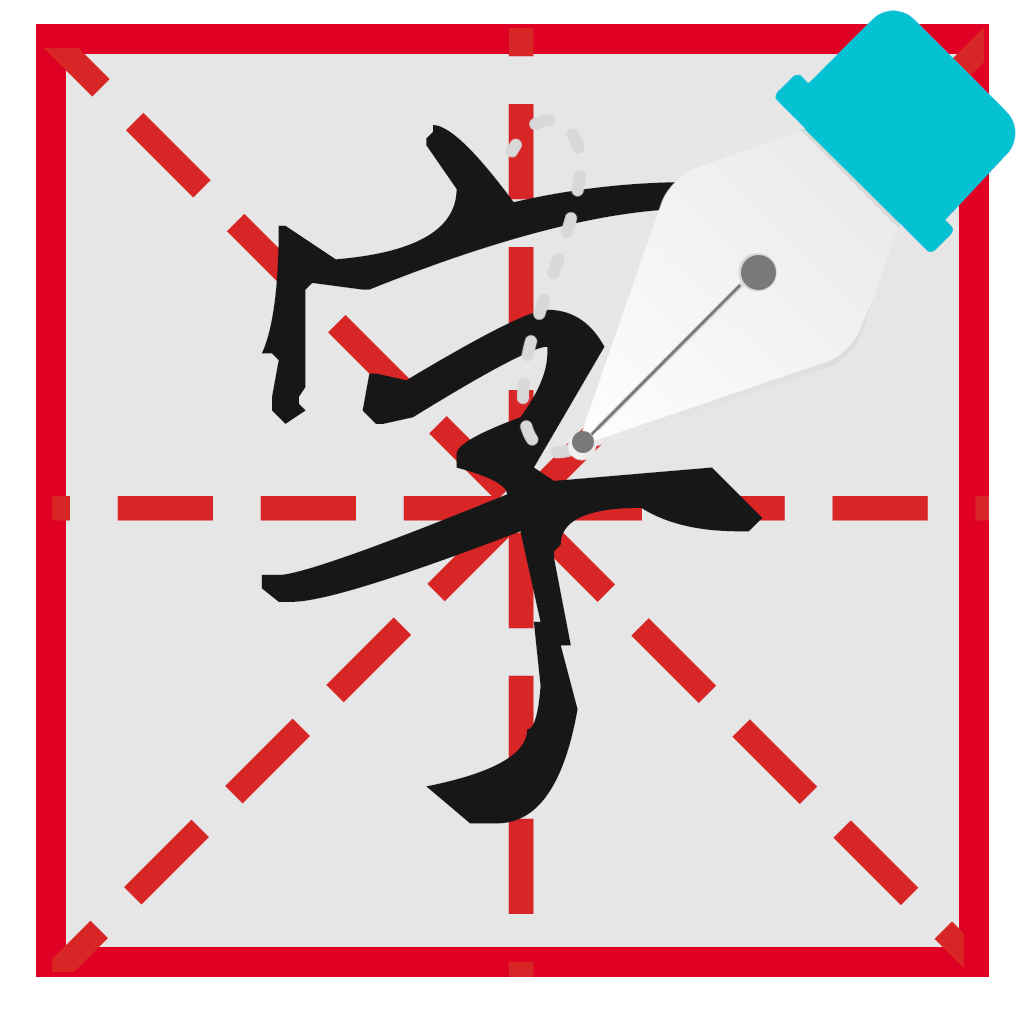
<style>
.page{position:relative;width:1024px;height:1024px;background:#e6e6e6}
.page>*{position:absolute;margin:0}
.t1{font:859.4px "TYZyingbikai";color:#171717}
</style>
<div class="page">
<p class="t1" style="left:261px;top:125px;width:508px;height:699px">字</p>
</div>
